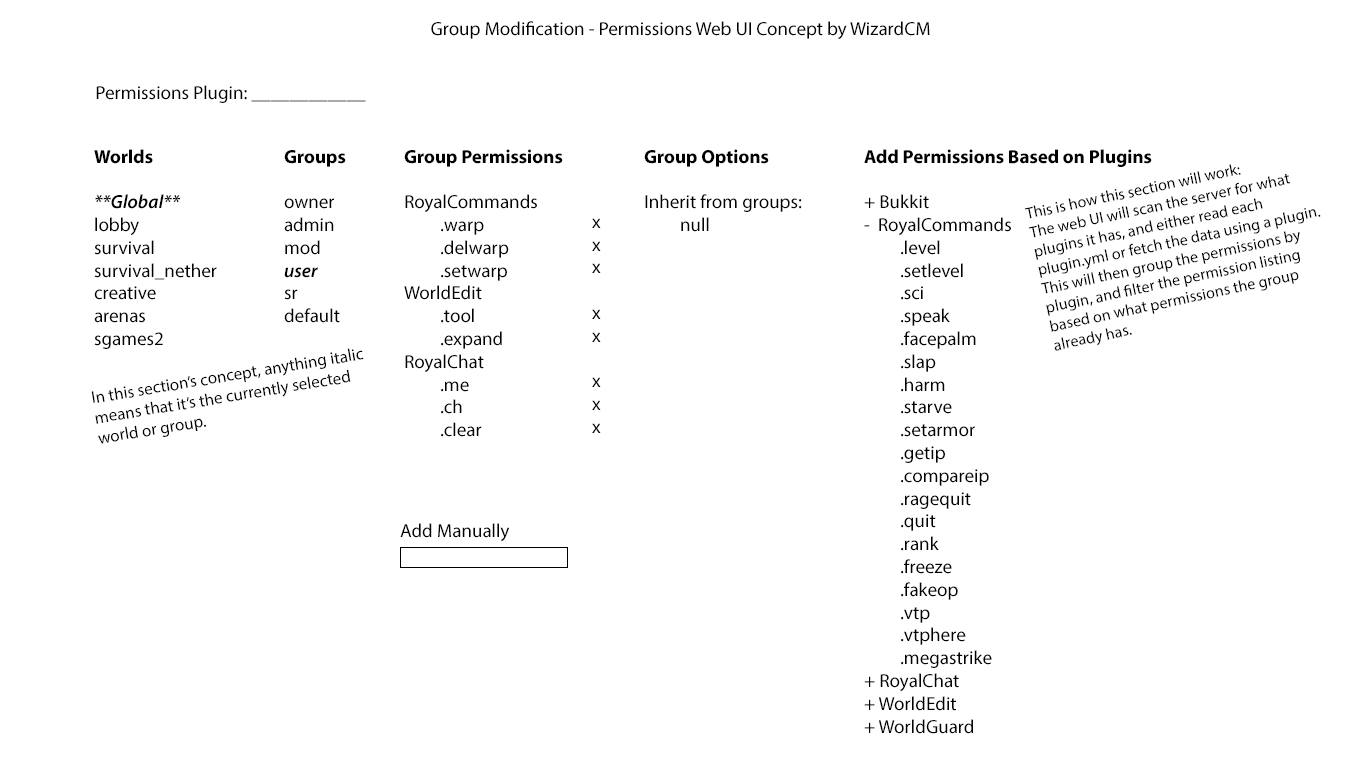
<style>
.page{position:relative;width:1366px;height:768px;background:#ffffff}
.page>*{position:absolute;margin:0}
.t1{font:19px "MyriadPro-Regular";color:#000000}
.t2{font:19px "MyriadPro-Bold";color:#000000}
.t3{font:19px "MyriadPro-SemiboldIt";color:#000000}
.t4{font:16px "MyriadPro-Regular";color:#000000}
.t5{font:17px "MyriadPro-Regular";color:#000000}
</style>
<div class="page">
<p class="t1" style="left:431px;top:21px;width:499px;height:19px">Group Modification - Permissions Web UI Concept by WizardCM</p>
<p class="t1" style="left:96px;top:85px;width:270px;height:18px">Permissions Plugin: ____________</p>
<p class="t1" style="left:94px;top:149px;width:123px;height:200px"><span class="t2">Worlds<br><br></span><span class="t3">**Global**<br></span>lobby<br>survival<br>survival_nether<br>creative<br>arenas<br>sgames2</p>
<p class="t1" style="left:284px;top:150px;width:62px;height:173px"><span class="t2">Groups<br></span><br>owner<br>admin<br>mod<br><span class="t3">user<br></span>sr<br>default</p>
<p class="t1" style="left:404px;top:149px;width:159px;height:288px"><span class="t2">Group Permissions<br></span><br>RoyalCommands<br> .warp<br> .delwarp<br> .setwarp<br>WorldEdit<br> .tool<br> .expand<br>RoyalChat<br> .me<br> .ch<br> .clear</p>
<p class="t1" style="left:644px;top:149px;width:158px;height:83px"><span class="t2">Group Options<br></span><br>Inherit from groups:<br> null</p>
<p class="t1" style="left:864px;top:149px;width:288px;height:585px"><span class="t2">Add Permissions Based on Plugins<br></span><br>+ Bukkit<br>-  RoyalCommands<br> .level<br> .setlevel <br> .sci<br> .speak<br> .facepalm <br> .slap<br> .harm<br> .starve <br> .setarmor <br> .getip<br> .compareip <br> .ragequit <br> .quit<br> .rank<br> .freeze <br> .fakeop <br> .vtp<br> .vtphere <br> .megastrike<br>+ RoyalChat<br>+ WorldEdit<br>+ WorldGuard</p>
<p class="t4" style="left:1024px;top:164px;width:297px;height:187px;rotate:-12deg">This is how this section will work:<br>The web UI will scan the server for what plugins it has, and either read each plugin.yml or fetch the data using a plugin.<br>This will then group the permissions by plugin, and filter the permission listing based on what permissions the group already has.</p>
<p class="t1" style="left:592px;top:218px;width:9px;height:215px">x<br>x<br>x<br><br>x<br>x<br><br>x<br>x<br>x</p>
<p class="t5" style="left:91px;top:348px;width:273px;height:96px;rotate:-9deg">In this section’s concept, anything italic<br>means that it’s the currently selected<br>world or group.</p>
<p class="t1" style="left:400px;top:523px;width:110px;height:19px">Add Manually</p>
</div>
